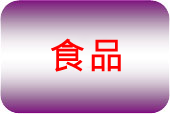
<style>
.page{position:relative;width:170px;height:114px}
.page>*{position:absolute;margin:0}
.t1{font:36px "MicrosoftJhengHeiRegular";letter-spacing:0.05em;color:#ff0000;font-weight:bold}
</style>
<div class="page">
<p class="t1" style="left:51px;top:38px;width:70px;height:34px">食品</p>
</div>
